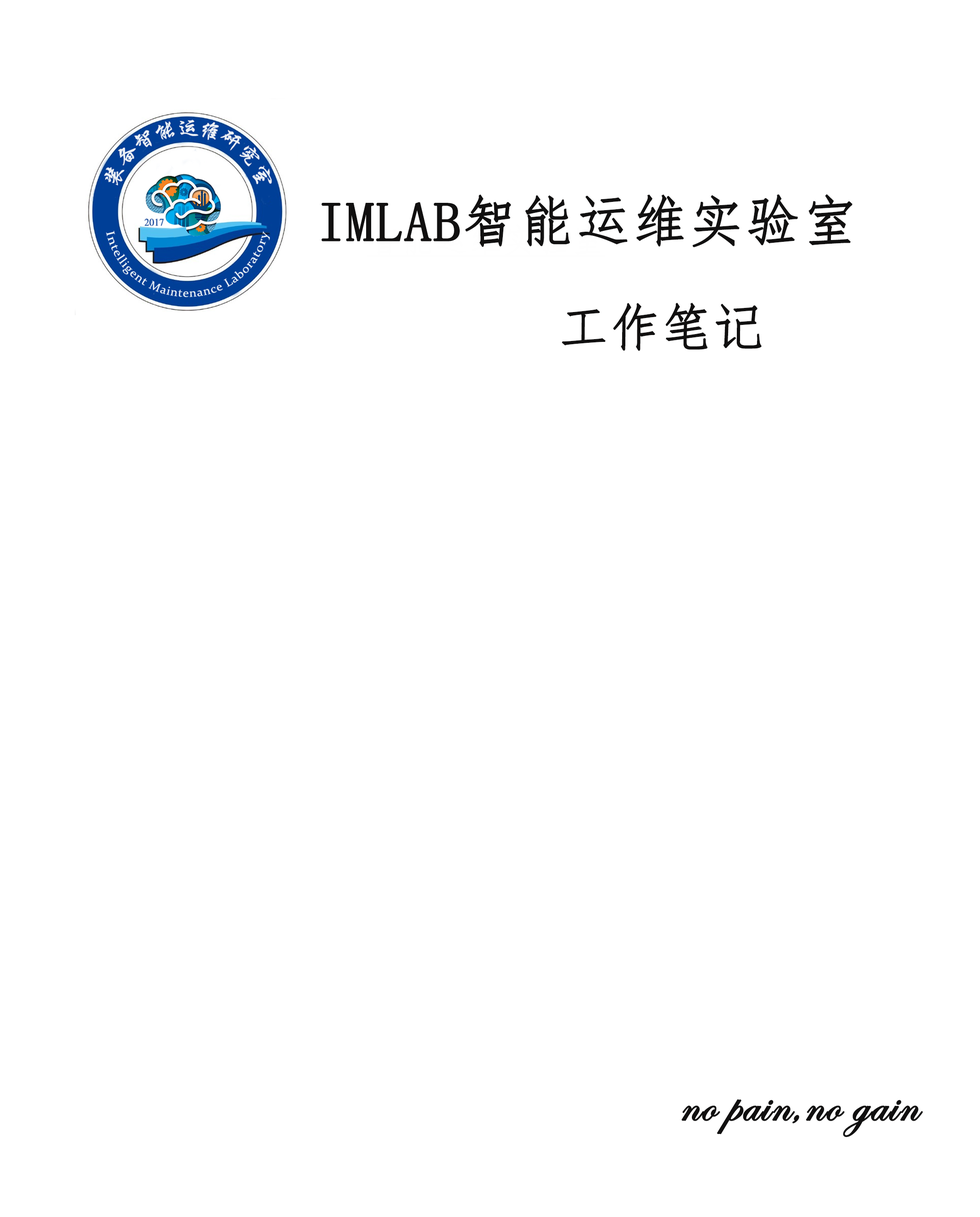
<style>
.page{position:relative;width:980px;height:1217px;background:#ffffff}
.page>*{position:absolute;margin:0}
.t1{font:55.1px "FangSong";color:#111010;font-weight:bold}
.t2{font:50.5px "FangSong";color:#111010;font-weight:bold}
.t3{font:50.5px "EdwardianScriptITC";color:#111010;font-weight:bold}
</style>
<div class="page">
<p class="t1" style="left:322px;top:194px;width:530px;height:53px">IMLAB智能运维实验室</p>
<p class="t2" style="left:562px;top:302px;width:200px;height:49px">工作笔记</p>
<p class="t3" style="left:681px;top:1099px;width:242px;height:38px">no pain,no gain</p>
</div>
